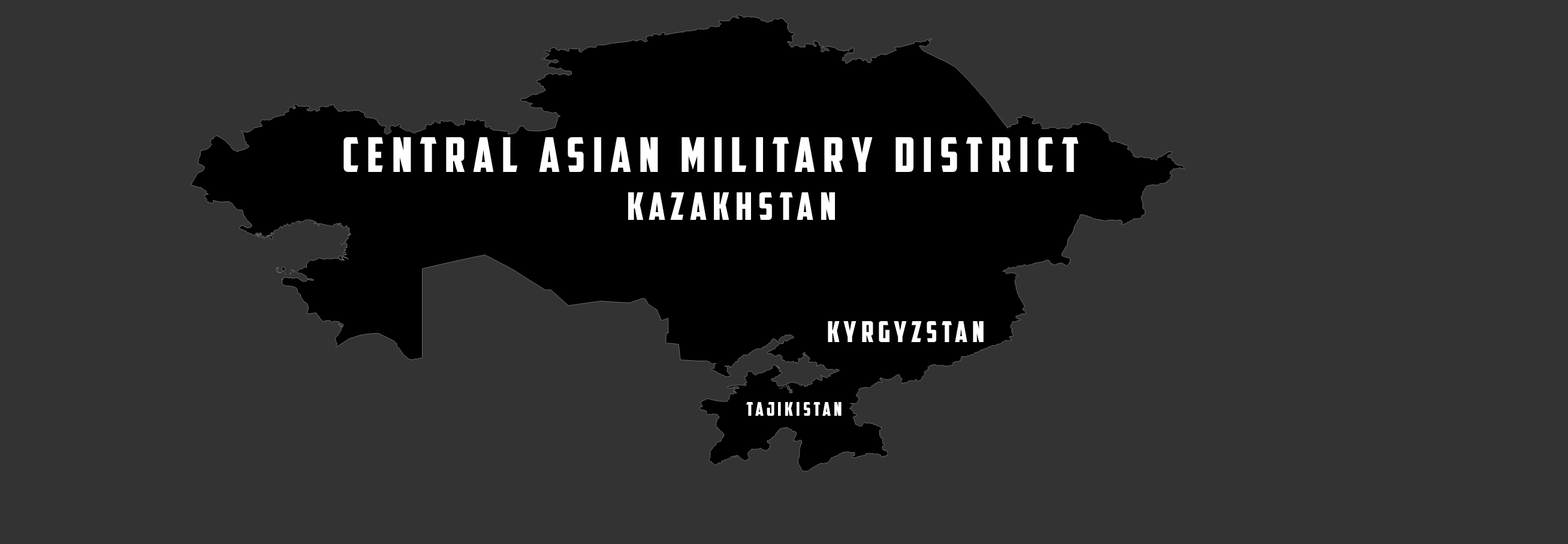
<style>
.page{position:relative;width:1568px;height:544px;background:#333333}
.page>*{position:absolute;margin:0}
.t1{font:48px "AmericanCaptain";letter-spacing:0.16em;color:#ffffff}
.t2{font:38.4px "AmericanCaptain";letter-spacing:0.16em;color:#ffffff}
.t3{font:28.8px "AmericanCaptain";letter-spacing:0.16em;color:#ffffff}
.t4{font:19.2px "AmericanCaptain";letter-spacing:0.16em;color:#ffffff}
</style>
<div class="page">
<p class="t1" style="left:343px;top:137px;width:736px;height:35px">central asian military district</p>
<p class="t2" style="left:628px;top:192px;width:207px;height:28px">kazakhstan</p>
<p class="t3" style="left:828px;top:321px;width:156px;height:21px">kyrgyzstan</p>
<p class="t4" style="left:746px;top:402px;width:96px;height:14px">tajikistan</p>
</div>
